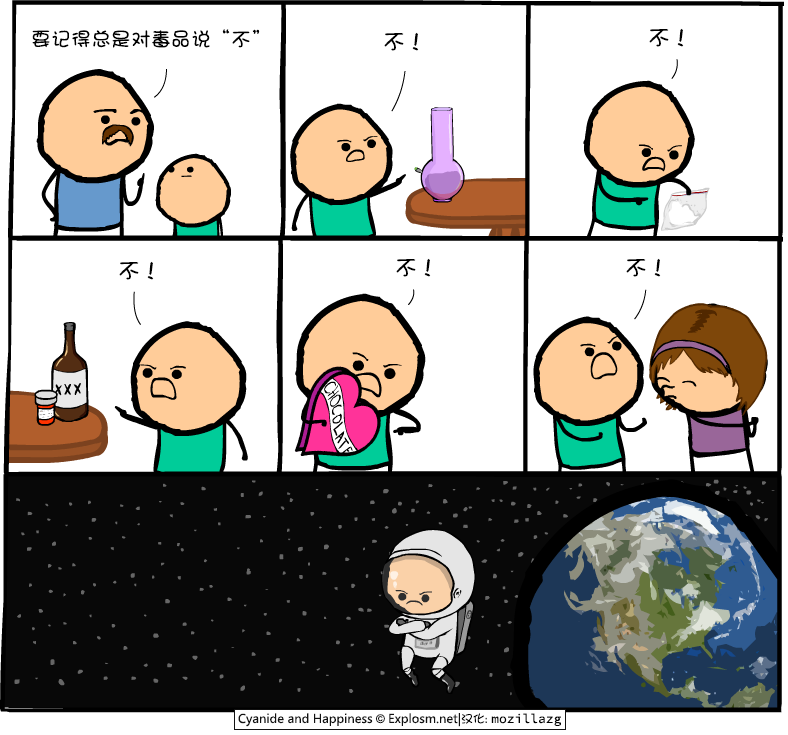
<style>
.page{position:relative;width:788px;height:735px;background:#ffffff}
.page>*{position:absolute;margin:0}
.t1{font:20px "DFGirl";color:#000000}
.t2{font:22px "DFGirl";color:#000000}
</style>
<div class="page">
<p class="t1" style="left:32px;top:29px;width:228px;height:19px">要记得总是对毒品说“不”</p>
<p class="t2" style="left:649px;top:28px;width:35px;height:19px">不！</p>
<p class="t2" style="left:384px;top:32px;width:35px;height:19px">不！</p>
<p class="t2" style="left:119px;top:261px;width:35px;height:19px">不！</p>
<p class="t2" style="left:396px;top:258px;width:35px;height:19px">不！</p>
<p class="t2" style="left:626px;top:258px;width:35px;height:19px">不！</p>
</div>
